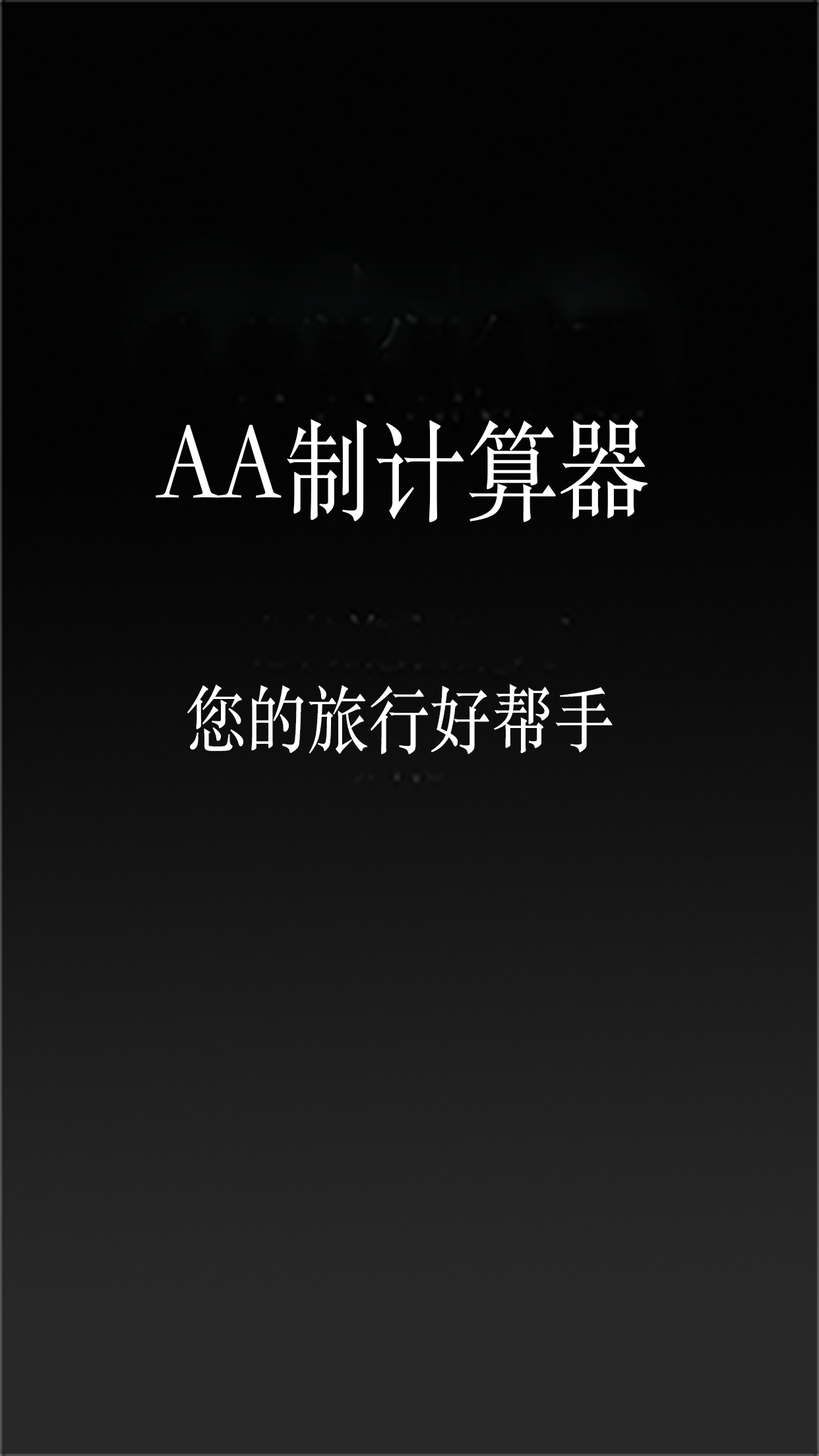
<style>
.page{position:relative;width:819px;height:1456px}
.page>*{position:absolute;margin:0}
.t1{font:109.2px "STSongti-SC-Regular";color:#ffffff;scale:0.84 1}
.t2{font:72.8px "STSongti-SC-Regular";color:#ffffff;scale:0.84 1}
</style>
<div class="page">
<p class="t1" style="left:156px;top:419px;width:492px;height:103px">AA制计算器</p>
<p class="t2" style="left:187px;top:684px;width:426px;height:70px">您的旅行好帮手</p>
</div>
